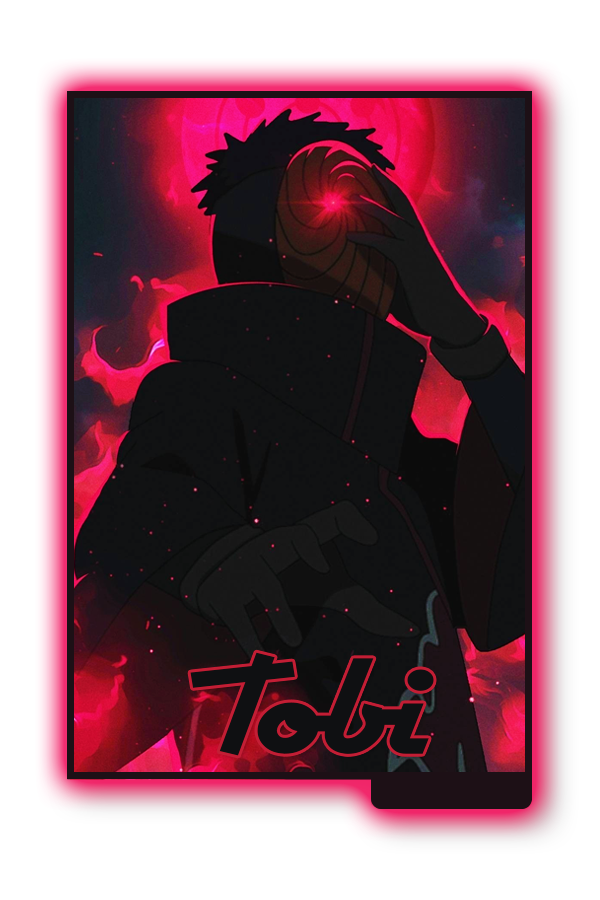
<style>
.page{position:relative;width:600px;height:900px;background:#ffffff}
.page>*{position:absolute;margin:0}
.t1{font:155.4px "Airstream";color:#121315;scale:1.23 1}
</style>
<div class="page">
<p class="t1" style="left:190px;top:652px;width:244px;height:104px">Tobi</p>
</div>
